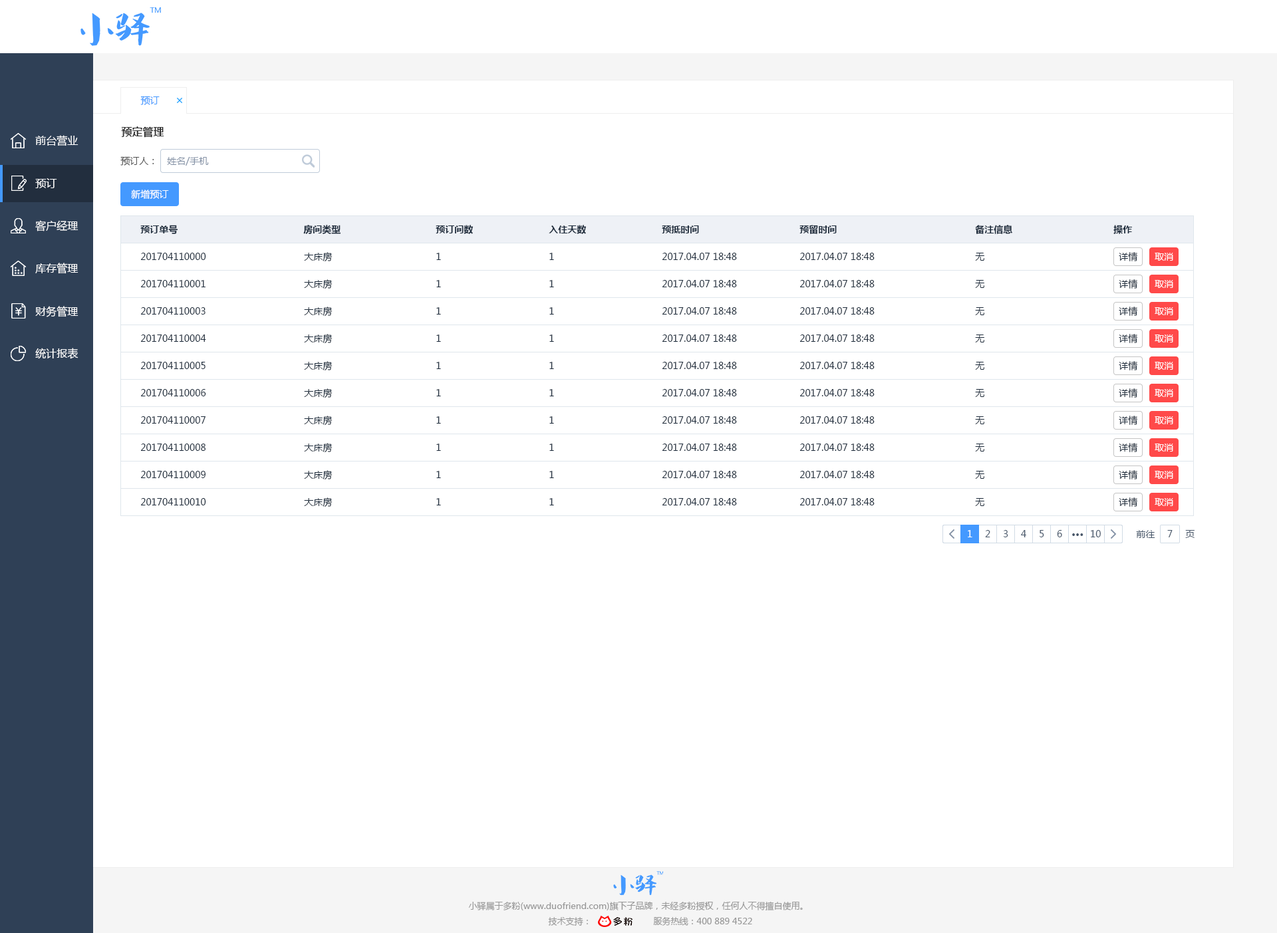
<style>
.page{position:relative;width:1277px;height:933px;background:#ffffff}
.page>*{position:absolute;margin:0}
.t1{font:9.3px "MicrosoftYaHei";color:#4499ff}
.t2{font:10.6px "MicrosoftYaHei";color:#ffffff}
.t3{font:10.6px "MicrosoftYaHei-Bold";color:#333333}
.t4{font:9.3px "MicrosoftYaHei";color:#505050}
.t5{font:9.3px "MicrosoftYaHei";color:#8391a5}
.t6{font:9.3px "MicrosoftYaHei";color:#ffffff}
.t7{font:9.3px "MicrosoftYaHei-Bold";color:#1f2d3d}
.t8{font:9.3px "MicrosoftYaHei";color:#1f2d3d}
.t9{font:9.3px "MicrosoftYaHei";color:#48576a}
.t10{font:9.3px "MicrosoftYaHei-Bold";color:#48576a}
.t11{font:8.6px "MicrosoftYaHei";color:#999999}
</style>
<div class="page">
<p class="t1" style="left:140px;top:96px;width:20px;height:9px">预订</p>
<p class="t2" style="left:35px;top:135px;width:44px;height:11px">前台营业</p>
<p class="t3" style="left:121px;top:126px;width:43px;height:12px">预定管理</p>
<p class="t4" style="left:120px;top:156px;width:34px;height:10px">预订人：</p>
<p class="t5" style="left:167px;top:157px;width:42px;height:9px">姓名/手机</p>
<p class="t2" style="left:35px;top:178px;width:22px;height:10px">预订</p>
<p class="t6" style="left:131px;top:190px;width:38px;height:9px">新增预订</p>
<p class="t2" style="left:35px;top:220px;width:44px;height:12px">客户经理</p>
<p class="t7" style="left:140px;top:225px;width:38px;height:9px">预订单号</p>
<p class="t7" style="left:303px;top:225px;width:38px;height:9px">房间类型</p>
<p class="t7" style="left:436px;top:225px;width:37px;height:9px">预订间数</p>
<p class="t7" style="left:549px;top:225px;width:37px;height:9px">入住天数</p>
<p class="t7" style="left:662px;top:226px;width:37px;height:8px">预抵时间</p>
<p class="t7" style="left:800px;top:225px;width:37px;height:9px">预留时间</p>
<p class="t7" style="left:975px;top:225px;width:38px;height:9px">备注信息</p>
<p class="t7" style="left:1114px;top:225px;width:18px;height:9px">操作</p>
<p class="t8" style="left:140px;top:253px;width:66px;height:7px">201704110000</p>
<p class="t8" style="left:304px;top:252px;width:29px;height:10px">大床房</p>
<p class="t8" style="left:436px;top:253px;width:5px;height:7px">1</p>
<p class="t8" style="left:550px;top:253px;width:4px;height:7px">1</p>
<p class="t8" style="left:662px;top:253px;width:75px;height:7px">2017.04.07 18:48</p>
<p class="t8" style="left:800px;top:253px;width:75px;height:7px">2017.04.07 18:48</p>
<p class="t8" style="left:975px;top:253px;width:10px;height:8px">无</p>
<p class="t8" style="left:1119px;top:252px;width:19px;height:9px">详情</p>
<p class="t6" style="left:1155px;top:253px;width:19px;height:8px">取消</p>
<p class="t2" style="left:35px;top:263px;width:44px;height:11px">库存管理</p>
<p class="t8" style="left:140px;top:280px;width:66px;height:7px">201704110001</p>
<p class="t8" style="left:304px;top:279px;width:29px;height:10px">大床房</p>
<p class="t8" style="left:436px;top:280px;width:5px;height:7px">1</p>
<p class="t8" style="left:550px;top:280px;width:4px;height:7px">1</p>
<p class="t8" style="left:662px;top:280px;width:75px;height:7px">2017.04.07 18:48</p>
<p class="t8" style="left:800px;top:280px;width:75px;height:7px">2017.04.07 18:48</p>
<p class="t8" style="left:975px;top:280px;width:10px;height:8px">无</p>
<p class="t8" style="left:1119px;top:279px;width:19px;height:10px">详情</p>
<p class="t6" style="left:1155px;top:280px;width:19px;height:8px">取消</p>
<p class="t2" style="left:35px;top:306px;width:44px;height:11px">财务管理</p>
<p class="t8" style="left:140px;top:307px;width:66px;height:8px">201704110003</p>
<p class="t8" style="left:304px;top:307px;width:29px;height:10px">大床房</p>
<p class="t8" style="left:436px;top:307px;width:5px;height:8px">1</p>
<p class="t8" style="left:550px;top:307px;width:4px;height:8px">1</p>
<p class="t8" style="left:662px;top:307px;width:75px;height:8px">2017.04.07 18:48</p>
<p class="t8" style="left:800px;top:307px;width:75px;height:8px">2017.04.07 18:48</p>
<p class="t8" style="left:975px;top:307px;width:10px;height:8px">无</p>
<p class="t8" style="left:1119px;top:307px;width:19px;height:9px">详情</p>
<p class="t6" style="left:1155px;top:307px;width:19px;height:8px">取消</p>
<p class="t8" style="left:140px;top:335px;width:66px;height:7px">201704110004</p>
<p class="t8" style="left:304px;top:334px;width:29px;height:10px">大床房</p>
<p class="t8" style="left:436px;top:335px;width:5px;height:7px">1</p>
<p class="t8" style="left:550px;top:335px;width:4px;height:7px">1</p>
<p class="t8" style="left:662px;top:335px;width:75px;height:7px">2017.04.07 18:48</p>
<p class="t8" style="left:800px;top:335px;width:75px;height:7px">2017.04.07 18:48</p>
<p class="t8" style="left:975px;top:335px;width:10px;height:8px">无</p>
<p class="t8" style="left:1119px;top:334px;width:19px;height:9px">详情</p>
<p class="t6" style="left:1155px;top:335px;width:19px;height:8px">取消</p>
<p class="t2" style="left:35px;top:348px;width:44px;height:11px">统计报表</p>
<p class="t8" style="left:140px;top:362px;width:66px;height:7px">201704110005</p>
<p class="t8" style="left:304px;top:361px;width:29px;height:10px">大床房</p>
<p class="t8" style="left:436px;top:362px;width:5px;height:7px">1</p>
<p class="t8" style="left:550px;top:362px;width:4px;height:7px">1</p>
<p class="t8" style="left:662px;top:362px;width:75px;height:7px">2017.04.07 18:48</p>
<p class="t8" style="left:800px;top:362px;width:75px;height:7px">2017.04.07 18:48</p>
<p class="t8" style="left:975px;top:362px;width:10px;height:8px">无</p>
<p class="t8" style="left:1119px;top:361px;width:19px;height:10px">详情</p>
<p class="t6" style="left:1155px;top:362px;width:19px;height:8px">取消</p>
<p class="t8" style="left:140px;top:389px;width:66px;height:8px">201704110006</p>
<p class="t8" style="left:304px;top:389px;width:29px;height:10px">大床房</p>
<p class="t8" style="left:436px;top:389px;width:5px;height:8px">1</p>
<p class="t8" style="left:550px;top:389px;width:4px;height:8px">1</p>
<p class="t8" style="left:662px;top:389px;width:75px;height:8px">2017.04.07 18:48</p>
<p class="t8" style="left:800px;top:389px;width:75px;height:8px">2017.04.07 18:48</p>
<p class="t8" style="left:975px;top:389px;width:10px;height:8px">无</p>
<p class="t8" style="left:1119px;top:389px;width:19px;height:9px">详情</p>
<p class="t6" style="left:1155px;top:389px;width:19px;height:8px">取消</p>
<p class="t8" style="left:140px;top:416px;width:66px;height:8px">201704110007</p>
<p class="t8" style="left:304px;top:416px;width:29px;height:10px">大床房</p>
<p class="t8" style="left:436px;top:416px;width:5px;height:8px">1</p>
<p class="t8" style="left:550px;top:416px;width:4px;height:8px">1</p>
<p class="t8" style="left:662px;top:416px;width:75px;height:8px">2017.04.07 18:48</p>
<p class="t8" style="left:800px;top:416px;width:75px;height:8px">2017.04.07 18:48</p>
<p class="t8" style="left:975px;top:416px;width:10px;height:8px">无</p>
<p class="t8" style="left:1119px;top:416px;width:19px;height:9px">详情</p>
<p class="t6" style="left:1155px;top:416px;width:19px;height:8px">取消</p>
<p class="t8" style="left:140px;top:444px;width:66px;height:7px">201704110008</p>
<p class="t8" style="left:304px;top:443px;width:29px;height:10px">大床房</p>
<p class="t8" style="left:436px;top:444px;width:5px;height:7px">1</p>
<p class="t8" style="left:550px;top:444px;width:4px;height:7px">1</p>
<p class="t8" style="left:662px;top:444px;width:75px;height:7px">2017.04.07 18:48</p>
<p class="t8" style="left:800px;top:444px;width:75px;height:7px">2017.04.07 18:48</p>
<p class="t8" style="left:975px;top:444px;width:10px;height:8px">无</p>
<p class="t8" style="left:1119px;top:443px;width:19px;height:9px">详情</p>
<p class="t6" style="left:1155px;top:444px;width:19px;height:8px">取消</p>
<p class="t8" style="left:140px;top:471px;width:66px;height:7px">201704110009</p>
<p class="t8" style="left:304px;top:470px;width:29px;height:10px">大床房</p>
<p class="t8" style="left:436px;top:471px;width:5px;height:7px">1</p>
<p class="t8" style="left:550px;top:471px;width:4px;height:7px">1</p>
<p class="t8" style="left:662px;top:471px;width:75px;height:7px">2017.04.07 18:48</p>
<p class="t8" style="left:800px;top:471px;width:75px;height:7px">2017.04.07 18:48</p>
<p class="t8" style="left:975px;top:471px;width:10px;height:8px">无</p>
<p class="t8" style="left:1119px;top:470px;width:19px;height:10px">详情</p>
<p class="t6" style="left:1155px;top:471px;width:19px;height:8px">取消</p>
<p class="t8" style="left:304px;top:498px;width:29px;height:10px">大床房</p>
<p class="t8" style="left:1119px;top:498px;width:19px;height:9px">详情</p>
<p class="t8" style="left:140px;top:498px;width:66px;height:8px">201704110010</p>
<p class="t8" style="left:436px;top:498px;width:5px;height:8px">1</p>
<p class="t8" style="left:550px;top:498px;width:4px;height:8px">1</p>
<p class="t8" style="left:662px;top:498px;width:75px;height:8px">2017.04.07 18:48</p>
<p class="t8" style="left:800px;top:498px;width:75px;height:8px">2017.04.07 18:48</p>
<p class="t8" style="left:975px;top:498px;width:10px;height:8px">无</p>
<p class="t6" style="left:1155px;top:498px;width:19px;height:8px">取消</p>
<p class="t6" style="left:968px;top:530px;width:5px;height:8px">1</p>
<p class="t9" style="left:985px;top:530px;width:6px;height:8px">2</p>
<p class="t9" style="left:1003px;top:530px;width:6px;height:8px">3</p>
<p class="t9" style="left:1021px;top:530px;width:6px;height:8px">4</p>
<p class="t9" style="left:1040px;top:530px;width:5px;height:8px">5</p>
<p class="t9" style="left:1057px;top:530px;width:6px;height:8px">6</p>
<p class="t10" style="left:1073px;top:534px;width:11px;height:2px">···</p>
<p class="t9" style="left:1091px;top:530px;width:10px;height:8px">10</p>
<p class="t9" style="left:1136px;top:530px;width:20px;height:8px">前往</p>
<p class="t9" style="left:1168px;top:530px;width:5px;height:8px">7</p>
<p class="t9" style="left:1186px;top:530px;width:9px;height:8px">页</p>
<p class="t11" style="left:468px;top:902px;width:335px;height:9px">小驿属于多粉(www.duofriend.com)旗下子品牌，未经多粉授权，任何人不得擅自使用。</p>
<p class="t11" style="left:548px;top:917px;width:40px;height:9px">技术支持：</p>
<p class="t11" style="left:653px;top:917px;width:99px;height:9px">服务热线：400 889 4522</p>
</div>
